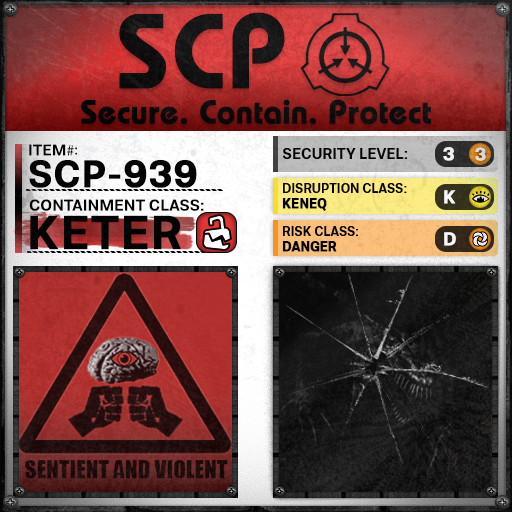
<style>
.page{position:relative;width:512px;height:512px}
.page>*{position:absolute;margin:0}
.t1{font:105.8px "BauhausLT-Demi";color:#000000;font-weight:bold}
.t2{font:33px "BauhausLT-Demi";color:#000000;font-weight:bold}
.t3{font:15.7px "Molde-Semibold";color:#000000}
.t4{font:15.7px "MyriadPro-Regular";color:#000000}
.t5{font:13.7px "Molde-Semibold";color:#000000}
.t6{font:15px "Molde-Semibold";color:#000000}
.t7{font:18.6px "Molde-Semibold";color:#ffffff;font-weight:bold}
.t8{font:17.8px "Molde-Semibold";color:#d9d9d9;font-weight:bold}
.t9{font:38.2px "Molde-Semibold";color:#000000;font-weight:bold}
.t10{font:12.8px "Molde-Semibold";color:#000000}
.t11{font:12.8px "Molde-Semibold";color:#000000;font-weight:bold}
.t12{font:15.9px "Molde-Semibold";color:#000000}
.t13{font:47.2px "Molde-Semibold";color:#000000;font-weight:bold}
</style>
<div class="page">
<p class="t1" style="left:119px;top:12px;width:166px;height:77px">SCP</p>
<p class="t2" style="left:81px;top:99px;width:350px;height:26px">Secure. Contain. Protect</p>
<p class="t3" style="left:29px;top:144px;width:45px;height:12px">ITEM<span class="t4">#</span></p>
<p class="t5" style="left:75px;top:147px;width:2px;height:8px">:</p>
<p class="t6" style="left:283px;top:148px;width:124px;height:11px">SECURITY LEVEL:</p>
<p class="t7" style="left:443px;top:147px;width:11px;height:14px">3</p>
<p class="t8" style="left:475px;top:147px;width:11px;height:14px">3</p>
<p class="t9" style="left:29px;top:160px;width:168px;height:28px">SCP-939</p>
<p class="t10" style="left:282px;top:183px;width:125px;height:28px">DISRUPTION CLASS:<br><span class="t11">KENEQ</span></p>
<p class="t7" style="left:444px;top:190px;width:12px;height:14px">K</p>
<p class="t12" style="left:29px;top:199px;width:175px;height:12px">CONTAINMENT CLASS:</p>
<p class="t13" style="left:30px;top:215px;width:151px;height:35px">KETER</p>
<p class="t10" style="left:282px;top:226px;width:76px;height:26px">RISK CLASS:<br><span class="t11">DANGER</span></p>
<p class="t7" style="left:444px;top:232px;width:12px;height:14px">D</p>
</div>
